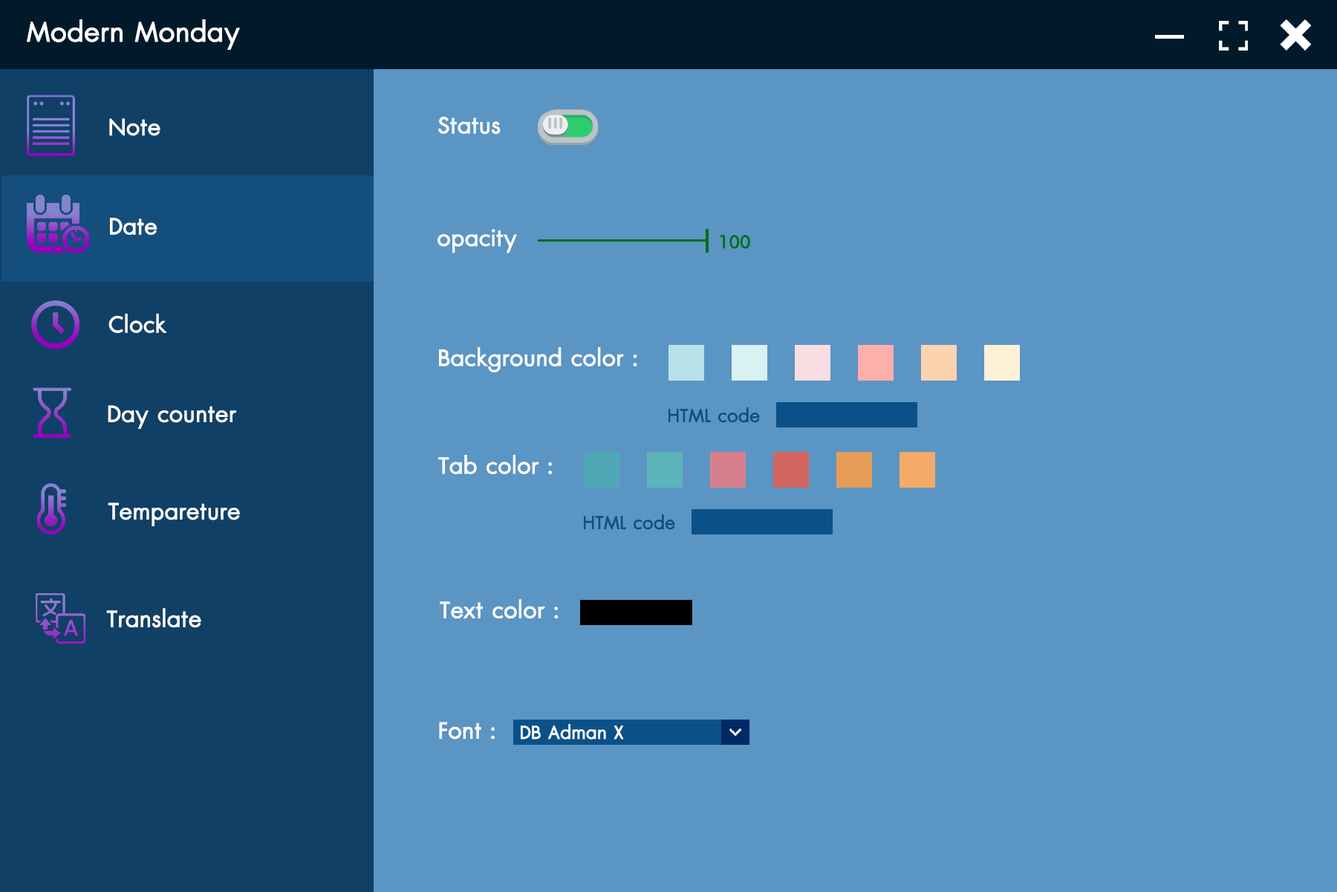
<style>
.page{position:relative;width:1337px;height:892px;background:#5b95c3}
.page>*{position:absolute;margin:0}
.t1{font:37.2px "DBAdmanX";color:#ffffff;font-weight:bold}
.t2{font:31px "DBAdmanX";color:#ffffff;font-weight:bold}
.t3{font:24.8px "DBAdmanX";color:#007012;font-weight:bold}
.t4{font:24.8px "DBAdmanX";color:#0a5189;font-weight:bold}
.t5{font:24.8px "DBAdmanX";color:#ffffff;font-weight:bold}
</style>
<div class="page">
<p class="t1" style="left:27px;top:19px;width:213px;height:31px">Modern Monday</p>
<p class="t2" style="left:109px;top:118px;width:51px;height:18px">Note</p>
<p class="t2" style="left:438px;top:117px;width:63px;height:17px">Status</p>
<p class="t2" style="left:110px;top:218px;width:48px;height:17px">Date</p>
<p class="t2" style="left:438px;top:229px;width:79px;height:24px">opacity</p>
<p class="t3" style="left:721px;top:235px;width:29px;height:14px">100</p>
<p class="t2" style="left:108px;top:314px;width:59px;height:19px">Clock</p>
<p class="t2" style="left:439px;top:347px;width:198px;height:25px">Background color :</p>
<p class="t2" style="left:108px;top:405px;width:129px;height:24px">Day counter</p>
<p class="t4" style="left:669px;top:406px;width:91px;height:17px">HTML code</p>
<p class="t2" style="left:438px;top:455px;width:114px;height:19px">Tab color :</p>
<p class="t2" style="left:108px;top:502px;width:132px;height:24px">Tempareture</p>
<p class="t4" style="left:584px;top:513px;width:91px;height:17px">HTML code</p>
<p class="t2" style="left:440px;top:599px;width:118px;height:19px">Text color :</p>
<p class="t2" style="left:106px;top:608px;width:95px;height:20px">Translate</p>
<p class="t2" style="left:439px;top:721px;width:56px;height:18px">Font :</p>
<p class="t5" style="left:521px;top:724px;width:103px;height:15px">DB Adman X</p>
</div>
